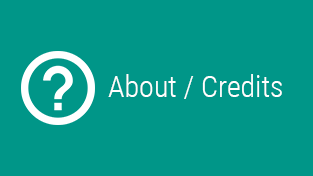
<style>
.page{position:relative;width:313px;height:176px;background:#009688}
.page>*{position:absolute;margin:0}
.t1{font:30px "RobotoCondensed-Light";color:#ffffff}
</style>
<div class="page">
<p class="t1" style="left:108px;top:74px;width:174px;height:25px">About / Credits</p>
</div>
